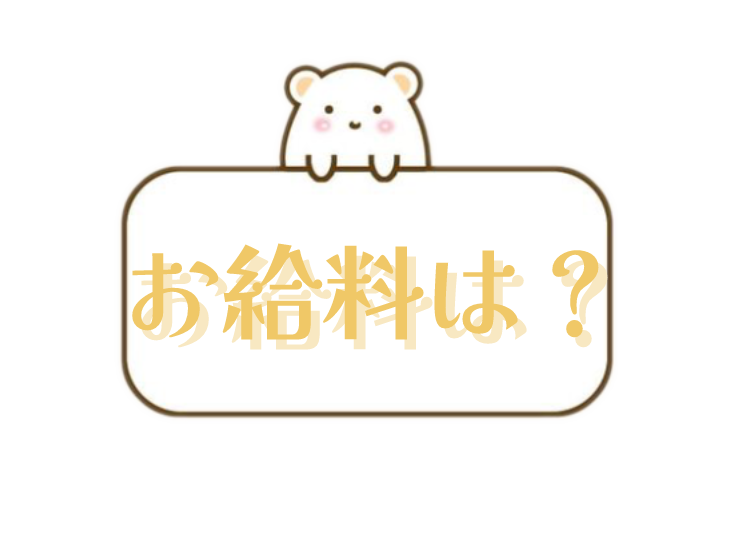
<style>
.page{position:relative;width:735px;height:551px;background:#ffffff}
.page>*{position:absolute;margin:0}
.t1{font:107px "KaiseiOpti-Bold";color:#f0c867;scale:0.95 1}
</style>
<div class="page">
<p class="t1" style="left:132px;top:243px;width:467px;height:97px">お給料は？</p>
</div>
